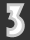
<style>
.page{position:relative;width:30px;height:40px;background:#333333}
.page>*{position:absolute;margin:0}
.t1{font:50px "Bauhaus93";letter-spacing:0.2em}
</style>
<div class="page">
<p class="t1" style="left:6px;top:3px;width:19px;height:35px">3</p>
</div>
